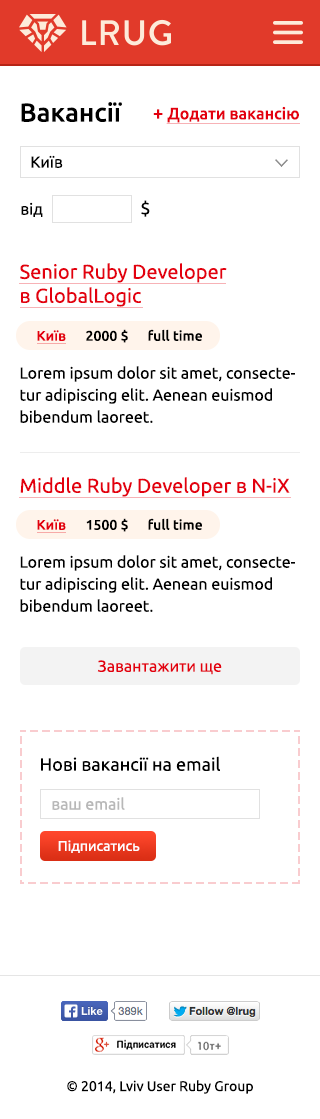
<style>
.page{position:relative;width:320px;height:1119px;background:#ffffff}
.page>*{position:absolute;margin:0}
.t1{font:26px "Ubuntu-Medium";color:#000000}
.t2{font:16.5px "Ubuntu-Medium";color:#e3000e}
.t3{font:18.5px "Ubuntu-Medium";color:#e3000e}
.t4{font:16px "Ubuntu";color:#000000}
.t5{font:18px "Ubuntu";color:#000000}
.t6{font:20px "Ubuntu";color:#e3000e}
.t7{font:14px "Ubuntu-Medium";color:#000000}
.t8{font:14px "Ubuntu-Medium";color:#e3000e}
.t9{font:16px/22px "Ubuntu";color:#000000}
.t10{font:16px "Ubuntu";color:#e3000e}
.t11{font:16px "Ubuntu";color:#b8b8b8}
.t12{font:14px "Ubuntu";color:#ffffff}
.t13{font:14px "Ubuntu";color:#000000}
</style>
<div class="page">
<p class="t1" style="left:21px;top:102px;width:101px;height:20px">Вакансії</p>
<p class="t2" style="left:153px;top:106px;width:146px;height:17px"><span class="t3">+ </span>Додати вакансію</p>
<p class="t4" style="left:31px;top:155px;width:32px;height:13px">Київ</p>
<p class="t4" style="left:21px;top:202px;width:22px;height:15px">від</p>
<p class="t5" style="left:141px;top:200px;width:9px;height:17px">$</p>
<p class="t6" style="left:20px;top:263px;width:207px;height:44px">Senior Ruby Developer <br>в GlobalLogic</p>
<p class="t7" style="left:86px;top:329px;width:42px;height:14px">2000 $</p>
<p class="t7" style="left:148px;top:329px;width:54px;height:12px">full time</p>
<p class="t8" style="left:37px;top:330px;width:29px;height:11px">Київ</p>
<p class="t9" style="left:20px;top:366px;width:275px;height:57px">Lorem ipsum dolor sit amet, consectetur adipiscing elit. Aenean euismod bibendum laoreet.</p>
<p class="t6" style="left:20px;top:477px;width:270px;height:20px">Middle Ruby Developer в N-iX</p>
<p class="t8" style="left:37px;top:519px;width:29px;height:11px">Київ</p>
<p class="t7" style="left:86px;top:518px;width:42px;height:14px">1500 $</p>
<p class="t7" style="left:148px;top:518px;width:54px;height:12px">full time</p>
<p class="t9" style="left:20px;top:555px;width:275px;height:57px">Lorem ipsum dolor sit amet, consectetur adipiscing elit. Aenean euismod bibendum laoreet.</p>
<p class="t10" style="left:97px;top:660px;width:125px;height:15px">Завантажити ще</p>
<p class="t5" style="left:41px;top:756px;width:179px;height:15px">Нові вакансії на email</p>
<p class="t11" style="left:52px;top:797px;width:73px;height:13px">ваш email</p>
<p class="t12" style="left:58px;top:840px;width:82px;height:13px">Підписатись</p>
<p class="t13" style="left:67px;top:1080px;width:186px;height:14px">© 2014, Lviv User Ruby Group</p>
</div>
